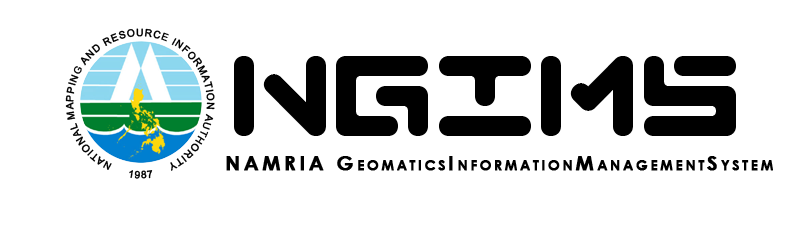
<style>
.page{position:relative;width:800px;height:250px;background:#ffffff}
.page>*{position:absolute;margin:0}
.t1{font:10px/18px "ArialMT";letter-spacing:0.075em;color:#000000;font-weight:bold}
.t2{font:100px "Abduction";letter-spacing:0.025em;color:#000000;font-variant:small-caps}
.t3{font:20px "CenturyGothic-Bold";letter-spacing:0.16em;color:#000000;font-variant:small-caps;font-weight:bold}
.t4{font:10px "ArialMT";letter-spacing:0.075em;color:#000000;font-weight:bold}
</style>
<div class="page">
<p class="t1" style="left:65px;top:28px;width:150px;height:143px">NATIONAL MAPPING AND RESOURCE INFORMATION AUTHORITY</p>
<p class="t2" style="left:234px;top:56px;width:502px;height:80px">NGIMS</p>
<p class="t3" style="left:226px;top:156px;width:547px;height:15px">NAMRIA GeomaticsInformationManagementSystem</p>
<p class="t4" style="left:129px;top:170px;width:24px;height:9px">1987</p>
</div>
